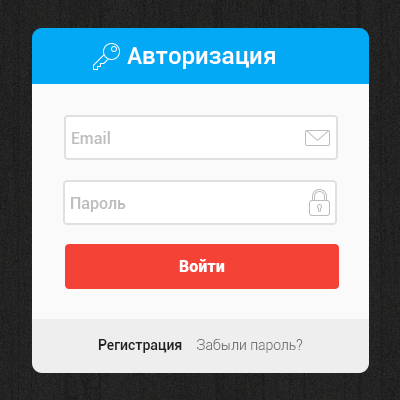
<style>
.page{position:relative;width:400px;height:400px;background:#fafafa}
.page>*{position:absolute;margin:0}
.t1{font:24px "Roboto-Medium";color:#ffffff}
.t2{font:16px "Roboto-Medium";color:#bdbdbd}
.t3{font:16px "Roboto-Black";color:#ffffff}
.t4{font:14px "Roboto-Light";color:#757575}
.t5{font:14px "Roboto-Medium";color:#212121}
</style>
<div class="page">
<p class="t1" style="left:127px;top:47px;width:148px;height:22px">Авторизация</p>
<p class="t2" style="left:72px;top:131px;width:38px;height:13px">Email</p>
<p class="t2" style="left:71px;top:197px;width:55px;height:15px">Пароль</p>
<p class="t3" style="left:179px;top:259px;width:46px;height:13px">Войти</p>
<p class="t4" style="left:98px;top:339px;width:205px;height:14px"><span class="t5">Регистрация    </span>Забыли пароль?</p>
</div>
